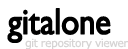
<style>
.page{position:relative;width:128px;height:49px;background:#ffffff}
.page>*{position:absolute;margin:0}
.t1{font:37.2px "GillSans";letter-spacing:-0.025em;color:#000000;font-weight:bold;scale:0.88 1}
.t2{font:11px "Verdana";letter-spacing:-0.05em;color:#d6d4d4}
</style>
<div class="page">
<p class="t1" style="left:7px;top:8px;width:104px;height:35px">gitalone</p>
<p class="t2" style="left:25px;top:38px;width:103px;height:11px">git repository viewer</p>
</div>
